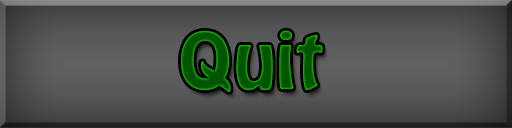
<style>
.page{position:relative;width:512px;height:128px}
.page>*{position:absolute;margin:0}
.t1{font:68.5px "HoboStd";color:#025500;scale:1.12 1}
</style>
<div class="page">
<p class="t1" style="left:181px;top:30px;width:142px;height:62px">Quit</p>
</div>
